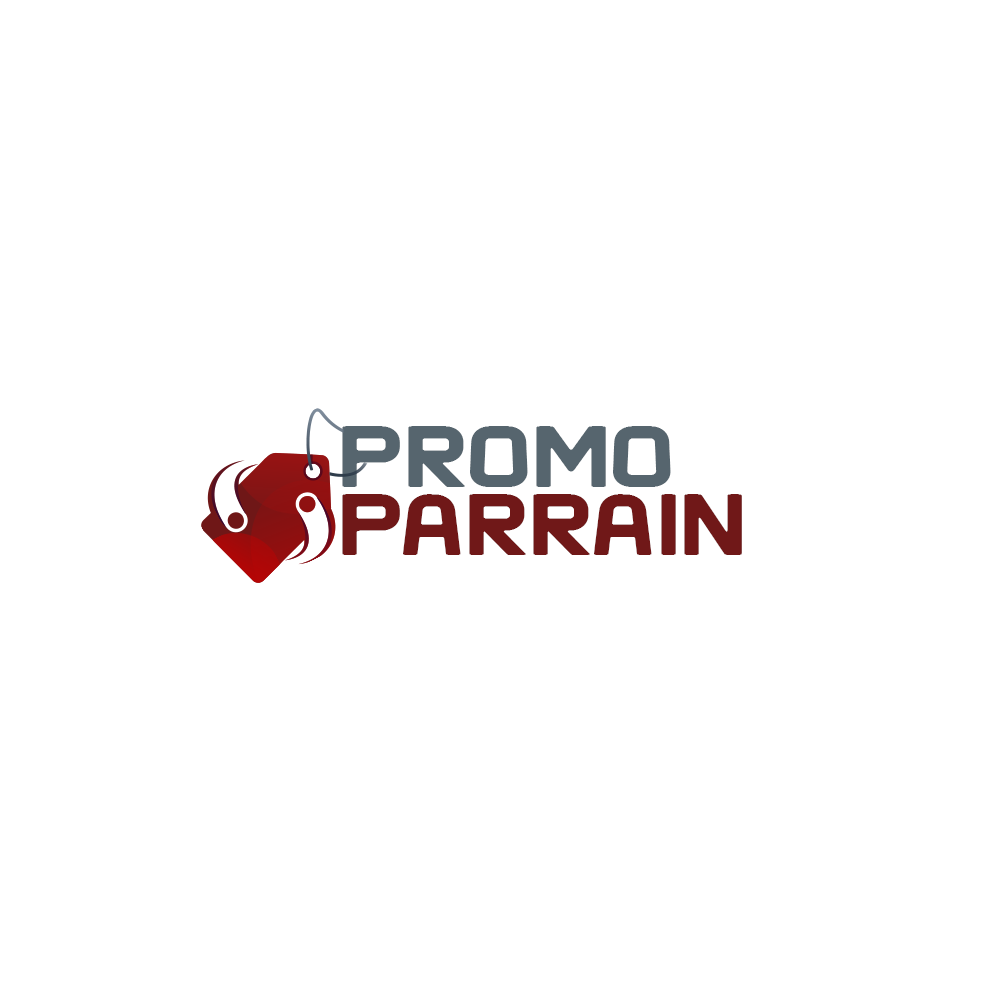
<style>
.page{position:relative;width:1000px;height:1000px;background:#ffffff}
.page>*{position:absolute;margin:0}
.t1{font:83px/61.8px "Clipangle-Bold";letter-spacing:0.025em;color:#701818;text-transform:uppercase;scale:1.18 1}
.t2{font:83px/61.8px "Clipangle-Bold";letter-spacing:0.025em;color:#56656e;text-transform:uppercase;scale:1.18 1}
</style>
<div class="page">
<p class="t1" style="left:342px;top:426px;width:400px;height:129px"><span class="t2">promo<br></span>parrain</p>
</div>
